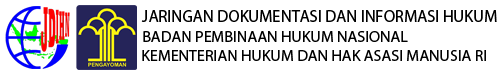
<style>
.page{position:relative;width:500px;height:74px;background:#ffffff}
.page>*{position:absolute;margin:0}
.t1{font:16.5px "MyriadPro-Regular";color:#000000}
.t2{font:16px "MyriadPro-Regular";color:#000000}
</style>
<div class="page">
<p class="t1" style="left:141px;top:10px;width:356px;height:12px">JARINGAN DOKUMENTASI DAN INFORMASI HUKUM</p>
<p class="t2" style="left:143px;top:31px;width:265px;height:11px">BADAN PEMBINAAN HUKUM NASIONAL</p>
<p class="t2" style="left:142px;top:50px;width:344px;height:11px">KEMENTERIAN HUKUM DAN HAK ASASI MANUSIA RI</p>
</div>
